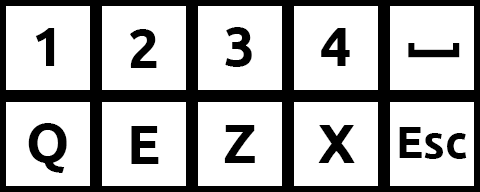
<style>
.page{position:relative;width:480px;height:192px;background:#ffffff}
.page>*{position:absolute;margin:0}
.t1{font:55.3px "Ubuntu-Bold";color:#000000}
.t2{font:52.6px "Ubuntu-Bold";color:#000000}
.t3{font:45px "Ubuntu-Bold";color:#000000}
</style>
<div class="page">
<p class="t1" style="left:35px;top:28px;width:20px;height:38px">1</p>
<p class="t1" style="left:130px;top:29px;width:27px;height:39px">2</p>
<p class="t1" style="left:225px;top:27px;width:27px;height:40px">3</p>
<p class="t1" style="left:321px;top:28px;width:29px;height:38px">4</p>
<p class="t2" style="left:408px;top:43px;width:52px;height:15px;rotate:-90deg">[</p>
<p class="t1" style="left:28px;top:123px;width:39px;height:50px">Q</p>
<p class="t1" style="left:131px;top:126px;width:28px;height:38px">E</p>
<p class="t1" style="left:224px;top:125px;width:31px;height:38px">Z</p>
<p class="t1" style="left:318px;top:125px;width:37px;height:38px">X</p>
<p class="t3" style="left:399px;top:127px;width:68px;height:32px">Esc</p>
</div>
